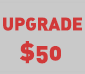
<style>
.page{position:relative;width:85px;height:74px;background:#c9c9c9}
.page>*{position:absolute;margin:0}
.t1{font:18px "DIN-BlackAlternate";color:#d13939}
.t2{font:24px "DIN-BlackAlternate";color:#d13939}
</style>
<div class="page">
<p class="t1" style="left:3px;top:17px;width:79px;height:14px">UPGRADE</p>
<p class="t2" style="left:20px;top:41px;width:41px;height:23px">$50</p>
</div>
